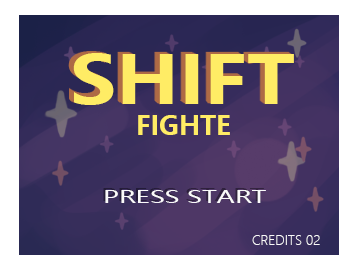
<style>
.page{position:relative;width:356px;height:271px;background:#ffffff}
.page>*{position:absolute;margin:0}
.t1{font:65.5px "MicrosoftYaHei-Bold";color:#ffec65;scale:1.17 1}
.t2{font:25.7px "MicrosoftYaHei-Bold";color:#ffec65}
.t3{font:17.4px "MicrosoftYaHei";color:#fafafa;scale:1.48 1}
.t4{font:12.9px "MicrosoftYaHeiLight";color:#f9f9f9}
</style>
<div class="page">
<p class="t1" style="left:73px;top:53px;width:221px;height:52px">SHIFT</p>
<p class="t2" style="left:138px;top:115px;width:92px;height:20px">FIGHTE</p>
<p class="t3" style="left:105px;top:190px;width:161px;height:13px">PRESS START</p>
<p class="t4" style="left:252px;top:235px;width:50px;height:10px">CREDITS</p>
<p class="t4" style="left:306px;top:235px;width:14px;height:10px">02</p>
</div>
